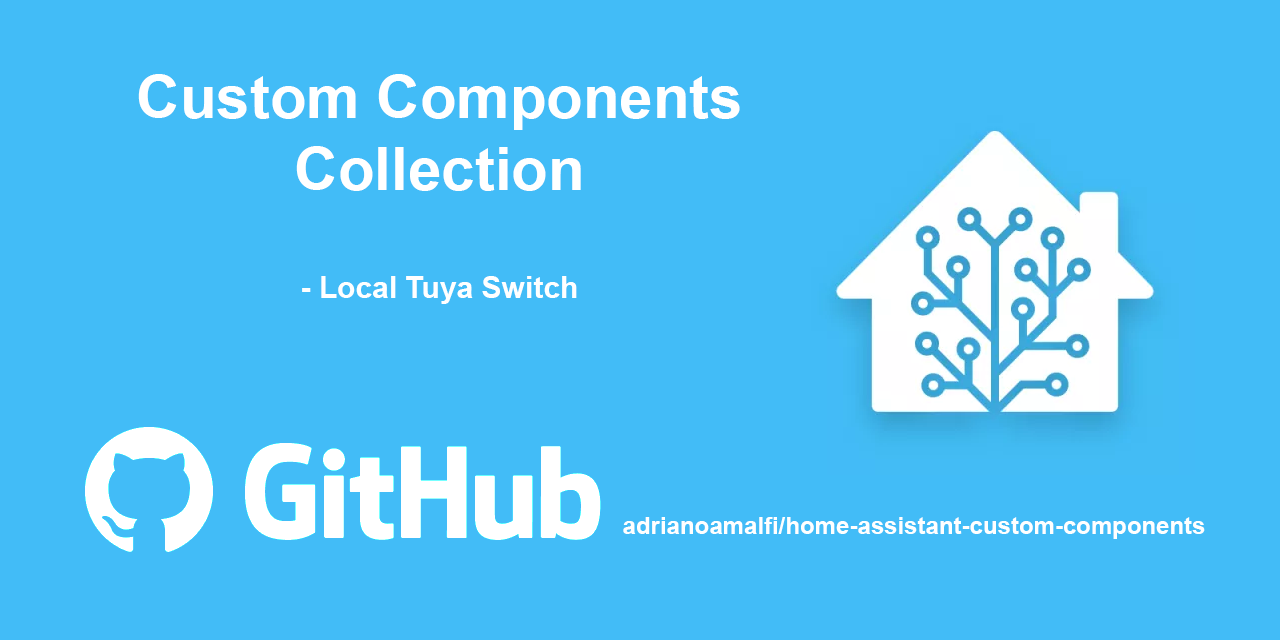
<style>
.page{position:relative;width:1280px;height:640px;background:#42bcf7}
.page>*{position:absolute;margin:0}
.t1{font:60px "Arial-BoldMT";color:#ffffff}
.t2{font:30px "Arial-BoldMT";color:#ffffff}
.t3{font:24px "Arial-BoldMT";color:#ffffff}
</style>
<div class="page">
<p class="t1" style="left:138px;top:74px;width:602px;height:230px;text-align:center">Custom Components <br>Collection<br><br><span class="t2">- Local Tuya Switch</span></p>
<p class="t3" style="left:623px;top:517px;width:582px;height:22px">adrianoamalfi/home-assistant-custom-components</p>
</div>
